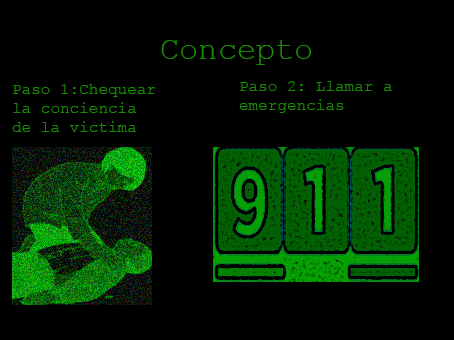
<style>
.page{position:relative;width:454px;height:340px;background:#000000}
.page>*{position:absolute;margin:0}
.t1{font:32px "CourierNewPSMT";color:#1a8b04}
.t2{font:16px "CourierNewPSMT";color:#1a8b04}
</style>
<div class="page">
<p class="t1" style="left:161px;top:40px;width:150px;height:25px">Concepto</p>
<p class="t2" style="left:12px;top:84px;width:144px;height:48px">Paso 1:Chequear <br>la conciencia<br>de la victima</p>
<p class="t2" style="left:239px;top:81px;width:153px;height:32px">Paso 2: Llamar a <br>emergencias</p>
</div>
